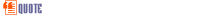
<style>
.page{position:relative;width:200px;height:15px;background:#ffffff}
.page>*{position:absolute;margin:0}
.t1{font:12px "VPS-Hoang-Sa-Hoa";letter-spacing:0.025em;color:#666699;font-weight:bold}
.t2{font:12px "VPS-Hoang-Sa-Hoa";letter-spacing:-0.025em;color:#666699;font-weight:bold}
</style>
<div class="page">
<p class="t1" style="left:18px;top:3px;width:24px;height:11px">qu<span class="t2">o</span>te</p>
</div>
